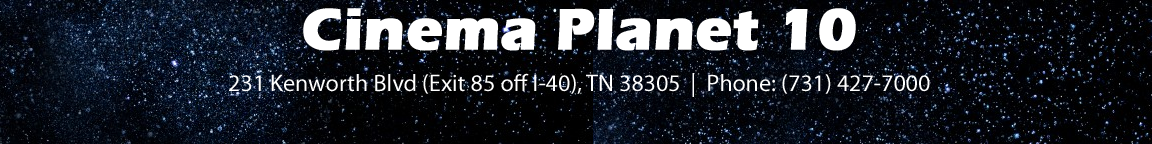
<style>
.page{position:relative;width:1152px;height:144px}
.page>*{position:absolute;margin:0}
.t1{font:24px "MyriadPro-Regular";color:#ffffff}
.t2{font:60px "ErasITC-Bold";color:#ffffff;font-weight:bold}
</style>
<div class="page">
<p class="t1" style="left:229px;top:8px;width:701px;height:89px;text-align:center"><span class="t2">Cinema Planet 10<br><br></span>231 Kenworth Blvd (Exit 85 off I-40), TN 38305  |  Phone: (731) 427-7000</p>
</div>
